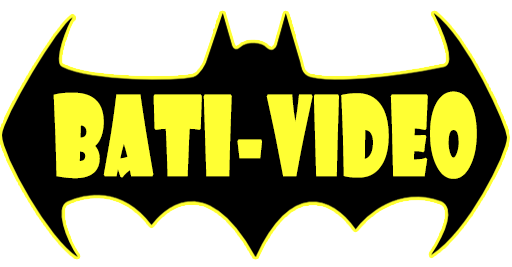
<style>
.page{position:relative;width:512px;height:267px;background:#ffffff}
.page>*{position:absolute;margin:0}
.t1{font:104.8px "ShowcardGothic-Reg";color:#ffff33;font-weight:bold;scale:0.72 1}
.t2{font:104.8px "ShowcardGothic-Reg";color:#ffff33;font-weight:bold;scale:0.65 1}
</style>
<div class="page">
<p class="t1" style="left:53px;top:91px;width:424px;height:88px">bati-<span class="t2">video</span></p>
</div>
